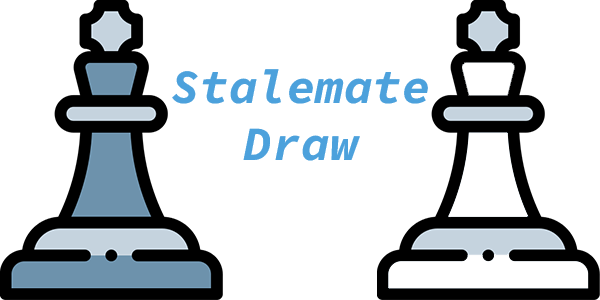
<style>
.page{position:relative;width:600px;height:300px;background:#ffffff}
.page>*{position:absolute;margin:0}
.t1{font:48px "SourceCodePro-Bold";color:#4ca1dc}
</style>
<div class="page">
<p class="t1" style="left:172px;top:69px;width:256px;height:92px;text-align:center">Stalemate<br>Draw</p>
</div>
